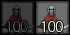
<style>
.page{position:relative;width:70px;height:35px}
.page>*{position:absolute;margin:0}
.t1{font:14px "KozGoPr6N-ExtraLight";color:#636363}
.t2{font:14px "KozGoPr6N-ExtraLight";color:#ffffff}
</style>
<div class="page">
<p class="t1" style="left:7px;top:21px;width:21px;height:11px">100</p>
<p class="t2" style="left:42px;top:21px;width:21px;height:11px">100</p>
</div>
